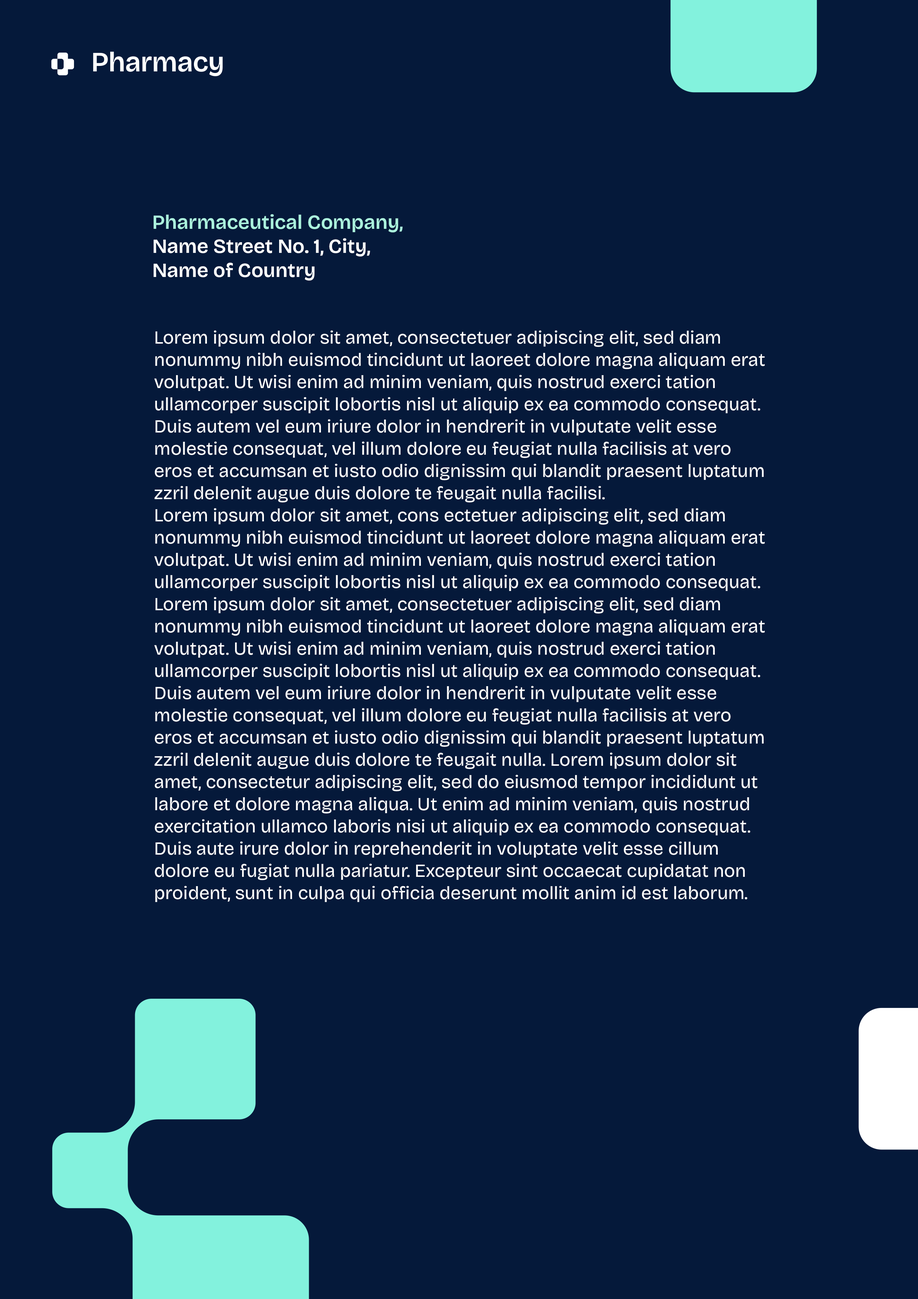
<style>
.page{position:relative;width:918px;height:1299px;background:#05193a}
.page>*{position:absolute;margin:0}
.t1{font:20.1px "BricolageGrotesque-SemiBold"}
.t2{font:18.5px "BricolageGrotesque-Regular";color:#ffffff}
</style>
<div class="page">
<p class="t1" style="left:154px;top:214px;width:249px;height:67px">Pharmaceutical Company, Name Street No. 1, City, Name of Country</p>
<p class="t2" style="left:154px;top:330px;width:611px;height:572px">Lorem ipsum dolor sit amet, consectetuer adipiscing elit, sed diam nonummy nibh euismod tincidunt ut laoreet dolore magna aliquam erat volutpat. Ut wisi enim ad minim veniam, quis nostrud exerci tation ullamcorper suscipit lobortis nisl ut aliquip ex ea commodo consequat. Duis autem vel eum iriure dolor in hendrerit in vulputate velit esse molestie consequat, vel illum dolore eu feugiat nulla facilisis at vero eros et accumsan et iusto odio dignissim qui blandit praesent luptatum zzril delenit augue duis dolore te feugait nulla facilisi.<br>Lorem ipsum dolor sit amet, cons ectetuer adipiscing elit, sed diam nonummy nibh euismod tincidunt ut laoreet dolore magna aliquam erat volutpat. Ut wisi enim ad minim veniam, quis nostrud exerci tation ullamcorper suscipit lobortis nisl ut aliquip ex ea commodo consequat.<br>Lorem ipsum dolor sit amet, consectetuer adipiscing elit, sed diam nonummy nibh euismod tincidunt ut laoreet dolore magna aliquam erat volutpat. Ut wisi enim ad minim veniam, quis nostrud exerci tation ullamcorper suscipit lobortis nisl ut aliquip ex ea commodo consequat. Duis autem vel eum iriure dolor in hendrerit in vulputate velit esse molestie consequat, vel illum dolore eu feugiat nulla facilisis at vero eros et accumsan et iusto odio dignissim qui blandit praesent luptatum zzril delenit augue duis dolore te feugait nulla. Lorem ipsum dolor sit amet, consectetur adipiscing elit, sed do eiusmod tempor incididunt ut labore et dolore magna aliqua. Ut enim ad minim veniam, quis nostrud exercitation ullamco laboris nisi ut aliquip ex ea commodo consequat. Duis aute irure dolor in reprehenderit in voluptate velit esse cillum dolore eu fugiat nulla pariatur. Excepteur sint occaecat cupidatat non proident, sunt in culpa qui officia deserunt mollit anim id est laborum.</p>
</div>
